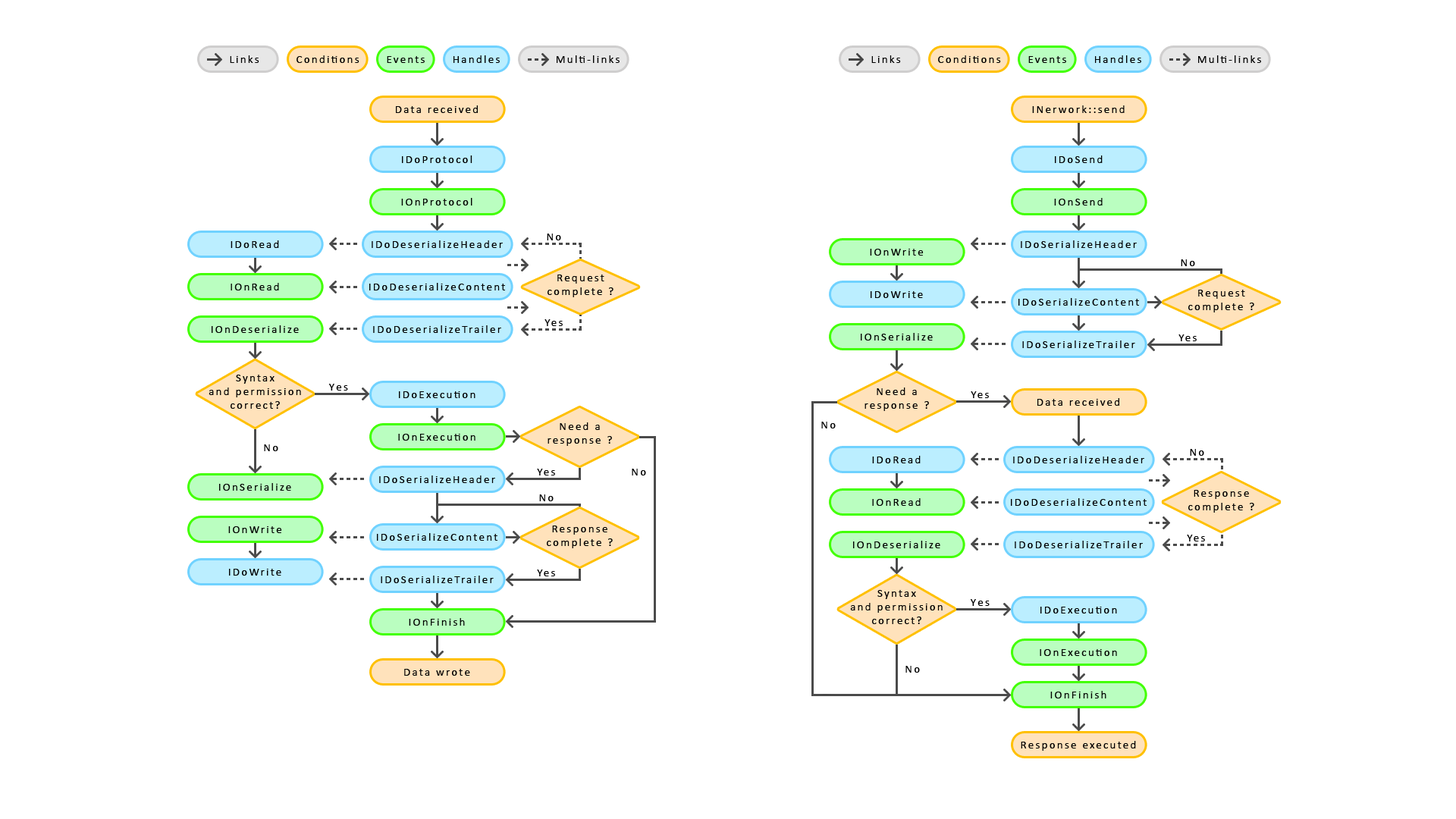
<style>
.page{position:relative;width:1456px;height:819px;background:#ffffff}
.page>*{position:absolute;margin:0}
.t1{font:11.4px "Calibri";letter-spacing:0.15em;color:#000000}
</style>
<div class="page">
<p class="t1" style="left:230px;top:55px;width:29px;height:8px">Links</p>
<p class="t1" style="left:297px;top:55px;width:62px;height:8px">Conditions</p>
<p class="t1" style="left:387px;top:56px;width:38px;height:7px">Events</p>
<p class="t1" style="left:453px;top:55px;width:47px;height:8px">Handles</p>
<p class="t1" style="left:557px;top:55px;width:63px;height:8px">Multi-links</p>
<p class="t1" style="left:871px;top:55px;width:30px;height:8px">Links</p>
<p class="t1" style="left:938px;top:55px;width:63px;height:8px">Conditions</p>
<p class="t1" style="left:1028px;top:56px;width:38px;height:7px">Events</p>
<p class="t1" style="left:1095px;top:55px;width:46px;height:8px">Handles</p>
<p class="t1" style="left:1198px;top:55px;width:63px;height:8px">Multi-links</p>
<p class="t1" style="left:396px;top:105px;width:82px;height:8px">Data received</p>
<p class="t1" style="left:1032px;top:105px;width:93px;height:8px">INerwork::send</p>
<p class="t1" style="left:402px;top:155px;width:70px;height:8px">IDoProtocol</p>
<p class="t1" style="left:1055px;top:155px;width:48px;height:8px">IDoSend</p>
<p class="t1" style="left:401px;top:198px;width:71px;height:8px">IOnProtocol</p>
<p class="t1" style="left:1054px;top:198px;width:49px;height:8px">IOnSend</p>
<p class="t1" style="left:547px;top:234px;width:14px;height:6px">No</p>
<p class="t1" style="left:231px;top:240px;width:48px;height:8px">IDoRead</p>
<p class="t1" style="left:372px;top:240px;width:131px;height:8px">IDoDeserializeHeader</p>
<p class="t1" style="left:1021px;top:240px;width:116px;height:8px">IDoSerializeHeader</p>
<p class="t1" style="left:870px;top:249px;width:54px;height:7px">IOnWrite</p>
<p class="t1" style="left:1181px;top:259px;width:14px;height:7px">No</p>
<p class="t1" style="left:548px;top:275px;width:65px;height:22px;text-align:center">Request complete ?</p>
<p class="t1" style="left:231px;top:283px;width:48px;height:7px">IOnRead</p>
<p class="t1" style="left:369px;top:283px;width:136px;height:7px">IDoDeserializeContent</p>
<p class="t1" style="left:871px;top:291px;width:52px;height:7px">IDoWrite</p>
<p class="t1" style="left:1188px;top:290px;width:66px;height:22px;text-align:center">Request complete ?</p>
<p class="t1" style="left:1018px;top:298px;width:121px;height:8px">IDoSerializeContent</p>
<p class="t1" style="left:212px;top:325px;width:87px;height:8px">IOnDeserialize</p>
<p class="t1" style="left:373px;top:325px;width:128px;height:8px">IDoDeserializeTrailer</p>
<p class="t1" style="left:544px;top:319px;width:19px;height:7px">Yes</p>
<p class="t1" style="left:861px;top:333px;width:72px;height:7px">IOnSerialize</p>
<p class="t1" style="left:1022px;top:340px;width:113px;height:8px">IDoSerializeTrailer</p>
<p class="t1" style="left:1178px;top:334px;width:19px;height:7px">Yes</p>
<p class="t1" style="left:209px;top:375px;width:92px;height:34px;text-align:center">Syntax<br>and permission<br>correct?</p>
<p class="t1" style="left:328px;top:384px;width:20px;height:7px">Yes</p>
<p class="t1" style="left:864px;top:388px;width:65px;height:23px;text-align:center">Need a<br>response ?</p>
<p class="t1" style="left:399px;top:391px;width:76px;height:7px">IDoExecution</p>
<p class="t1" style="left:971px;top:391px;width:18px;height:7px">Yes</p>
<p class="t1" style="left:1037px;top:398px;width:82px;height:8px">Data received</p>
<p class="t1" style="left:548px;top:422px;width:64px;height:24px;text-align:center">Need a<br>response ?</p>
<p class="t1" style="left:821px;top:422px;width:15px;height:6px">No</p>
<p class="t1" style="left:398px;top:434px;width:77px;height:7px">IOnExecution</p>
<p class="t1" style="left:264px;top:444px;width:14px;height:7px">No</p>
<p class="t1" style="left:1190px;top:449px;width:14px;height:7px">No</p>
<p class="t1" style="left:872px;top:456px;width:49px;height:7px">IDoRead</p>
<p class="t1" style="left:1013px;top:456px;width:131px;height:7px">IDoDeserializeHeader</p>
<p class="t1" style="left:537px;top:469px;width:18px;height:6px">Yes</p>
<p class="t1" style="left:632px;top:469px;width:14px;height:6px">No</p>
<p class="t1" style="left:219px;top:483px;width:72px;height:8px">IOnSerialize</p>
<p class="t1" style="left:379px;top:475px;width:116px;height:8px">IDoSerializeHeader</p>
<p class="t1" style="left:539px;top:494px;width:15px;height:7px">No</p>
<p class="t1" style="left:1188px;top:490px;width:66px;height:23px;text-align:center">Response complete ?</p>
<p class="t1" style="left:872px;top:498px;width:49px;height:8px">IOnRead</p>
<p class="t1" style="left:1011px;top:498px;width:136px;height:8px">IDoDeserializeContent</p>
<p class="t1" style="left:228px;top:526px;width:54px;height:7px">IOnWrite</p>
<p class="t1" style="left:377px;top:533px;width:120px;height:8px">IDoSerializeContent</p>
<p class="t1" style="left:547px;top:526px;width:66px;height:22px;text-align:center">Response complete ?</p>
<p class="t1" style="left:853px;top:541px;width:87px;height:7px">IOnDeserialize</p>
<p class="t1" style="left:1015px;top:541px;width:128px;height:7px">IDoDeserializeTrailer</p>
<p class="t1" style="left:1187px;top:535px;width:18px;height:6px">Yes</p>
<p class="t1" style="left:229px;top:569px;width:52px;height:7px">IDoWrite</p>
<p class="t1" style="left:537px;top:570px;width:18px;height:6px">Yes</p>
<p class="t1" style="left:381px;top:576px;width:113px;height:7px">IDoSerializeTrailer</p>
<p class="t1" style="left:850px;top:590px;width:93px;height:34px;text-align:center">Syntax<br>and permission<br>correct?</p>
<p class="t1" style="left:970px;top:599px;width:20px;height:7px">Yes</p>
<p class="t1" style="left:1040px;top:607px;width:77px;height:6px">IDoExecution</p>
<p class="t1" style="left:409px;top:618px;width:56px;height:8px">IOnFinish</p>
<p class="t1" style="left:1040px;top:649px;width:77px;height:7px">IOnExecution</p>
<p class="t1" style="left:905px;top:666px;width:15px;height:7px">No</p>
<p class="t1" style="left:404px;top:669px;width:66px;height:7px">Data wrote</p>
<p class="t1" style="left:1050px;top:691px;width:56px;height:7px">IOnFinish</p>
<p class="t1" style="left:1021px;top:741px;width:115px;height:10px">Response executed</p>
</div>
